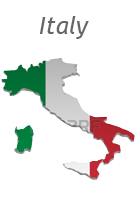
<style>
.page{position:relative;width:136px;height:200px;background:#ffffff}
.page>*{position:absolute;margin:0}
.t1{font:24px "TrebuchetMS-Italic";color:#666666}
</style>
<div class="page">
<p class="t1" style="left:39px;top:16px;width:50px;height:23px">Italy</p>
</div>
